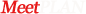
<style>
.page{position:relative;width:86px;height:14px;background:#ffffff}
.page>*{position:absolute;margin:0}
.t1{font:18px "Georgia";letter-spacing:-0.06em;color:#e61a1a;font-weight:bold;font-style:italic}
.t2{font:18px "Georgia";letter-spacing:-0.06em;color:#faf8f6;font-weight:bold;font-style:italic}
</style>
<div class="page">
<p class="t1" style="left:0px;top:0px;width:86px;height:14px">Meet<span class="t2">PLAN</span></p>
</div>
